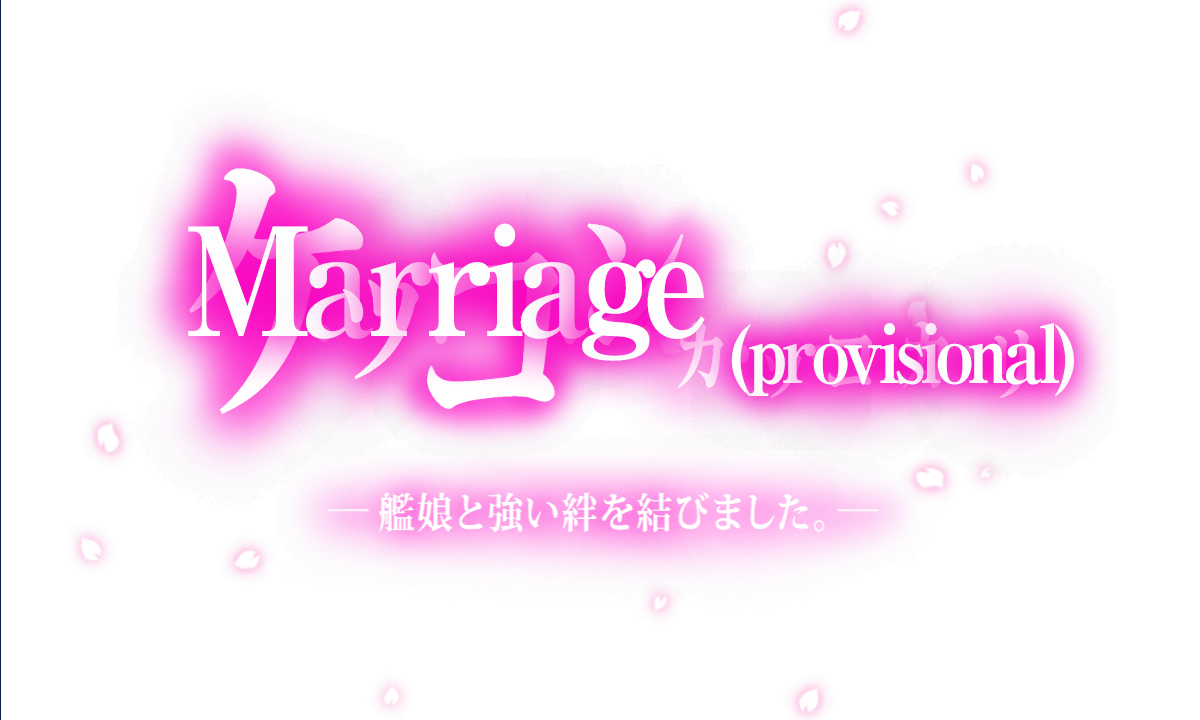
<style>
.page{position:relative;width:1200px;height:720px;background:#ffffff}
.page>*{position:absolute;margin:0}
.t1{font:150px "RyuminPro-ExBold";letter-spacing:-0.08em;color:#fdfdfd;scale:0.9 1}
.t2{font:80px "RyuminPro-ExBold";letter-spacing:-0.08em;color:#fdfdfd;scale:0.9 1}
</style>
<div class="page">
<p class="t1" style="left:188px;top:226px;width:186px;height:113px">Ma</p>
<p class="t1" style="left:428px;top:223px;width:161px;height:116px">ria</p>
<p class="t1" style="left:370px;top:262px;width:62px;height:74px">r</p>
<p class="t1" style="left:582px;top:259px;width:123px;height:102px">ge</p>
<p class="t2" style="left:731px;top:324px;width:85px;height:72px">(pr</p>
<p class="t2" style="left:813px;top:323px;width:128px;height:62px">ovisi</p>
<p class="t2" style="left:937px;top:323px;width:137px;height:73px">onal)</p>
</div>
